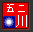
<style>
.page{position:relative;width:33px;height:32px;background:#f20000}
.page>*{position:absolute;margin:0}
.t1{font:10.4px "SimSun";color:#ffffff}
.t2{font:11.7px "SimSun";color:#ffffff}
</style>
<div class="page">
<p class="t1" style="left:7px;top:4px;width:18px;height:8px">五二</p>
<p class="t2" style="left:16px;top:15px;width:11px;height:12px">川</p>
</div>
